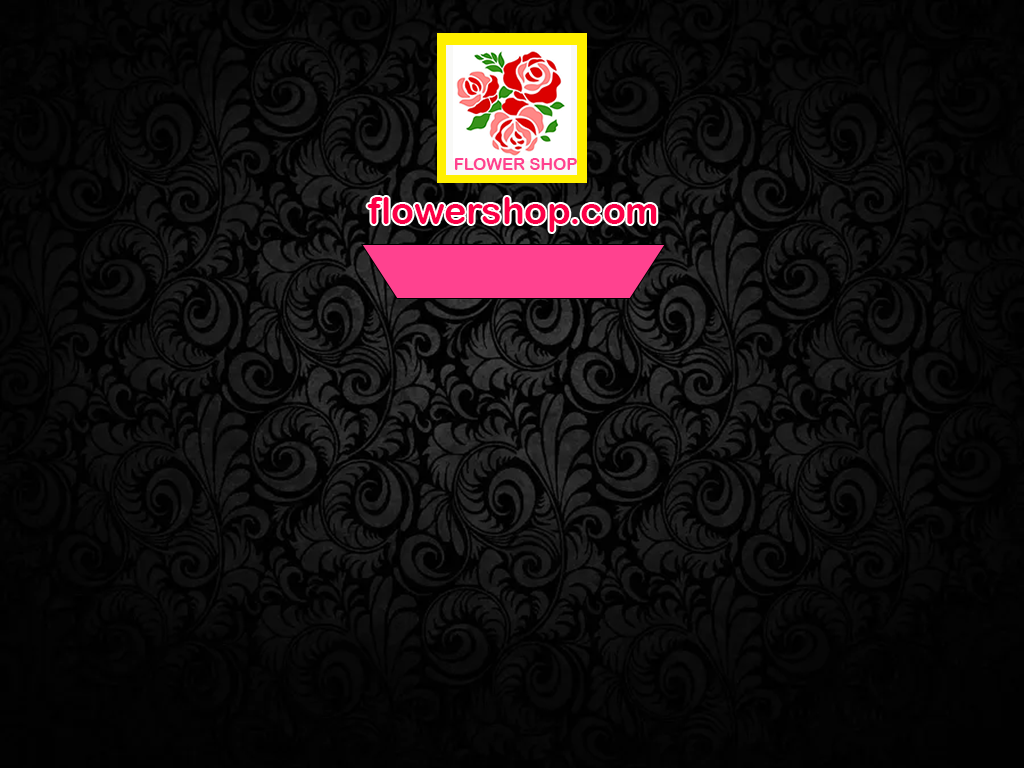
<style>
.page{position:relative;width:1024px;height:768px}
.page>*{position:absolute;margin:0}
.t1{font:37.5px "ArialRoundedMTBold";color:#fc0047}
</style>
<div class="page">
<p class="t1" style="left:367px;top:197px;width:290px;height:35px">flowershop.com</p>
</div>
